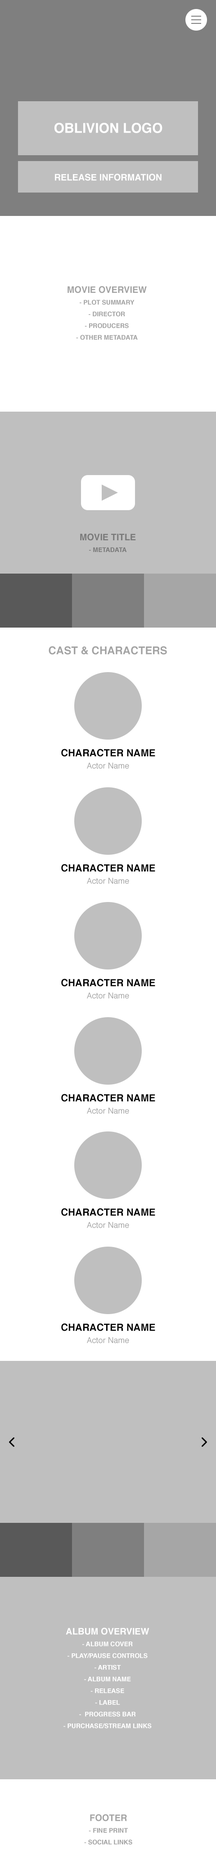
<style>
.page{position:relative;width:216px;height:1876px;background:#ffffff}
.page>*{position:absolute;margin:0}
.t1{font:13.5px "Helvetica-Bold";color:#ffffff;text-transform:uppercase}
.t2{font:9px "Helvetica-Bold";color:#ffffff;text-transform:uppercase}
.t3{font:6.3px/11.7px "Helvetica-Bold";color:#a3a3a3;text-transform:uppercase}
.t4{font:9px/11.7px "Helvetica-Bold";color:#a3a3a3;text-transform:uppercase}
.t5{font:9px/11.7px "Helvetica-Bold";color:#797979;text-transform:uppercase}
.t6{font:6.3px/11.7px "Helvetica-Bold";color:#797979;text-transform:uppercase}
.t7{font:10.8px "Helvetica-Bold";color:#a3a3a3;text-transform:uppercase}
.t8{font:9.9px "Helvetica-Bold";color:#000000;text-transform:uppercase}
.t9{font:8.1px "Helvetica";color:#a3a3a3}
.t10{font:6.3px/11.7px "Helvetica-Bold";color:#ffffff;text-transform:uppercase}
.t11{font:9px/11.7px "Helvetica-Bold";color:#ffffff;text-transform:uppercase}
</style>
<div class="page">
<p class="t1" style="left:54px;top:123px;width:108px;height:10px">Oblivion Logo</p>
<p class="t2" style="left:55px;top:174px;width:107px;height:7px">Release Information</p>
<p class="t3" style="left:68px;top:286px;width:79px;height:54px;text-align:center"><span class="t4">Movie Overview<br></span>- Plot Summary<br>- Director<br>- Producers<br>- Other MetaData</p>
<p class="t5" style="left:80px;top:534px;width:56px;height:18px;text-align:center">Movie Title<br><span class="t6">- Metadata</span></p>
<p class="t7" style="left:49px;top:646px;width:118px;height:9px">Cast &amp; Characters</p>
<p class="t8" style="left:61px;top:749px;width:94px;height:8px">Character Name</p>
<p class="t9" style="left:87px;top:763px;width:42px;height:6px">Actor Name</p>
<p class="t8" style="left:61px;top:864px;width:94px;height:8px">Character Name</p>
<p class="t9" style="left:87px;top:878px;width:42px;height:6px">Actor Name</p>
<p class="t8" style="left:61px;top:979px;width:94px;height:8px">Character Name</p>
<p class="t9" style="left:87px;top:993px;width:42px;height:6px">Actor Name</p>
<p class="t8" style="left:61px;top:1094px;width:94px;height:8px">Character Name</p>
<p class="t9" style="left:87px;top:1108px;width:42px;height:6px">Actor Name</p>
<p class="t8" style="left:61px;top:1208px;width:94px;height:8px">Character Name</p>
<p class="t9" style="left:87px;top:1222px;width:42px;height:6px">Actor Name</p>
<p class="t8" style="left:61px;top:1323px;width:94px;height:9px">Character Name</p>
<p class="t9" style="left:87px;top:1337px;width:42px;height:7px">Actor Name</p>
<p class="t10" style="left:63px;top:1628px;width:89px;height:101px;text-align:center"><span class="t11">Album Overview<br></span>- Album Cover<br>- Play/Pause Controls<br>- Artist<br>- Album Name<br>- Release<br>- Label<br>-  Progress Bar<br>- Purchase/Stream Links</p>
<p class="t3" style="left:84px;top:1814px;width:48px;height:31px;text-align:center"><span class="t4">Footer<br></span>- Fine Print<br>- Social Links</p>
</div>
